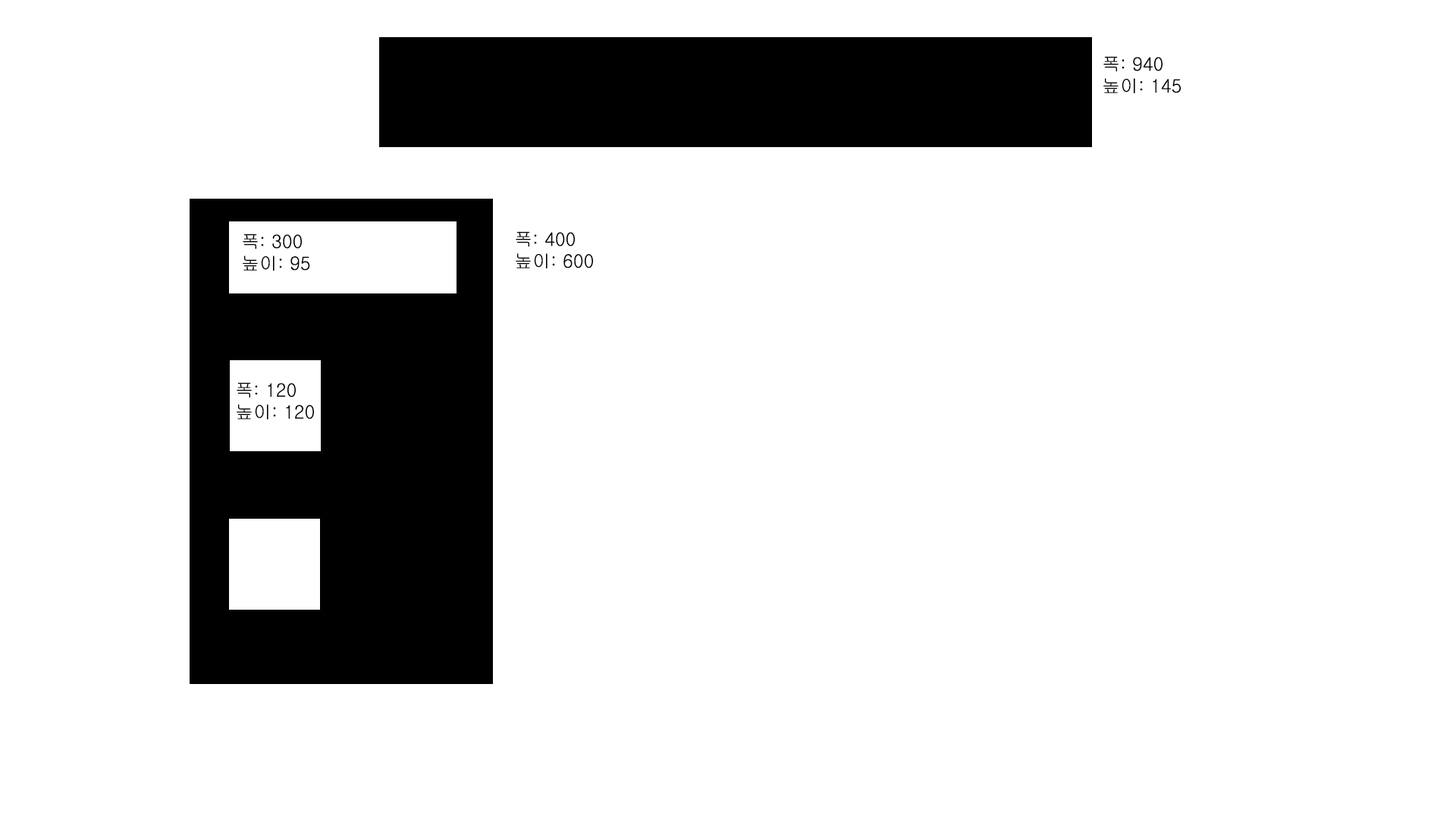
<style>
.page{position:relative;width:1456px;height:819px;background:#ffffff}
.page>*{position:absolute;margin:0}
.t1{font:18.2px "Gulim";color:#000000}
</style>
<div class="page">
<p class="t1" style="left:1103px;top:56px;width:78px;height:37px">폭: 940<br>높이: 145</p>
<p class="t1" style="left:243px;top:234px;width:67px;height:37px">폭: 300<br>높이: 95</p>
<p class="t1" style="left:516px;top:231px;width:77px;height:37px">폭: 400<br>높이: 600</p>
<p class="t1" style="left:237px;top:382px;width:77px;height:37px">폭: 120<br>높이: 120</p>
</div>
